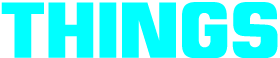
<style>
.page{position:relative;width:280px;height:58px;background:#00ffff}
.page>*{position:absolute;margin:0}
.t1{font:72px "NeographikMT";color:#00ffff}
</style>
<div class="page">
<p class="t1" style="left:1px;top:2px;width:277px;height:57px">THINGS</p>
</div>
